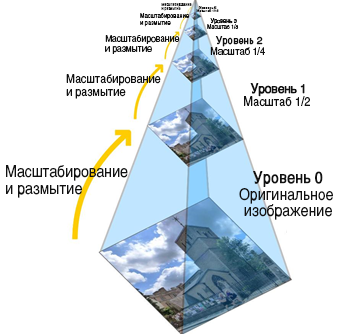
<style>
.page{position:relative;width:345px;height:334px;background:#ffffff}
.page>*{position:absolute;margin:0}
.t1{font:4.2px "Helvetica-Regular";color:#111111;scale:0.81 1}
.t2{font:3.4px "Helvetica-Regular";color:#111111}
.t3{font:3.4px "Helvetica-Regular";color:#111111;font-weight:bold}
.t4{font:6.7px "Helvetica-Regular";color:#111111;scale:0.83 1}
.t5{font:5.9px "Helvetica-Regular";color:#111111;scale:0.9 1}
.t6{font:5.9px "Helvetica-Regular";color:#111111;font-weight:bold;scale:0.9 1}
.t7{font:9.7px "Helvetica-Regular";color:#111111;scale:0.88 1}
.t8{font:10.5px "Helvetica-Regular";color:#111111;scale:0.88 1}
.t9{font:10.5px "Helvetica-Regular";color:#111111;font-weight:bold;scale:0.88 1}
.t10{font:12.2px "Helvetica-Regular";color:#111111;scale:0.89 1}
.t11{font:12.8px "Helvetica-Regular";color:#111111;scale:0.87 1}
.t12{font:12.8px "Helvetica-Regular";color:#111111;font-weight:bold;scale:0.87 1}
.t13{font:16.1px "Helvetica-Regular";color:#111111;scale:0.87 1}
.t14{font:16.1px "Helvetica-Regular";color:#111111;font-weight:bold;scale:0.87 1}
</style>
<div class="page">
<p class="t1" style="left:161px;top:3px;width:31px;height:8px">Масштабирование<br>и размытие</p>
<p class="t2" style="left:196px;top:6px;width:23px;height:6px;text-align:center"><span class="t3">Уровень 5<br></span>Масштаб 1/16</p>
<p class="t4" style="left:140px;top:13px;width:50px;height:14px">Масштабирование<br>и размытие</p>
<p class="t5" style="left:207px;top:18px;width:32px;height:11px;text-align:center"><span class="t6">Уровень 3<br></span>Масштаб 1/8</p>
<p class="t7" style="left:105px;top:35px;width:75px;height:19px">Масштабирование<br>и размытие</p>
<p class="t8" style="left:210px;top:36px;width:55px;height:19px;text-align:center"><span class="t9">Уровень 2<br></span>Масштаб 1/4</p>
<p class="t10" style="left:66px;top:74px;width:95px;height:25px">Масштабирование<br>и размытие</p>
<p class="t11" style="left:244px;top:83px;width:66px;height:24px;text-align:center"><span class="t12">Уровень 1<br></span>Масштаб 1/2</p>
<p class="t13" style="left:6px;top:165px;width:122px;height:33px">Масштабирование<br>и размытие</p>
<p class="t13" style="left:239px;top:171px;width:94px;height:49px;text-align:center"><span class="t14">Уровень 0<br></span>Оригинальное <br>изображение</p>
</div>
